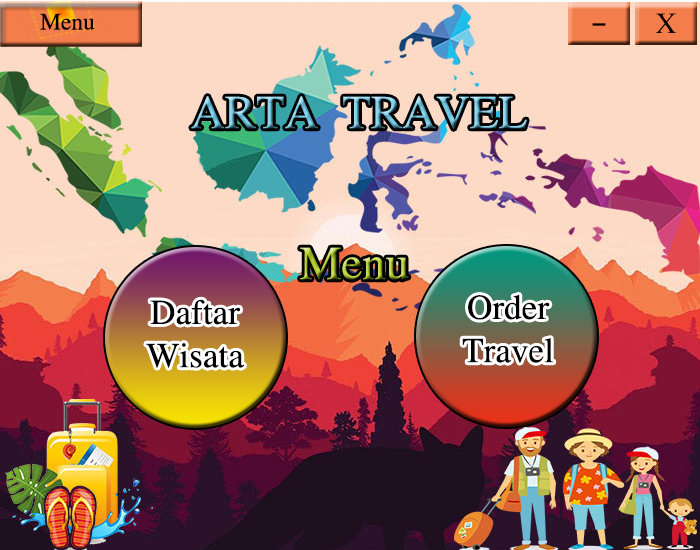
<style>
.page{position:relative;width:700px;height:550px;background:#fddac6}
.page>*{position:absolute;margin:0}
.t1{font:24px "aakar-medium";color:#000000}
.t2{font:30px "aakar-medium";color:#000000}
.t3{font:48px "aakar-medium";color:#000000}
.t4{font:48px "aakar-medium"}
.t5{font:36px "aakar-medium";color:#000000}
</style>
<div class="page">
<p class="t1" style="left:40px;top:13px;width:55px;height:17px">Menu</p>
<p class="t2" style="left:655px;top:13px;width:22px;height:20px">X</p>
<p class="t3" style="left:592px;top:23px;width:14px;height:3px">-</p>
<p class="t4" style="left:300px;top:247px;width:109px;height:33px">Menu</p>
<p class="t5" style="left:462px;top:294px;width:92px;height:69px;text-align:center">Order<br>Travel</p>
<p class="t5" style="left:146px;top:299px;width:98px;height:69px;text-align:center">Daftar<br>Wisata</p>
</div>
